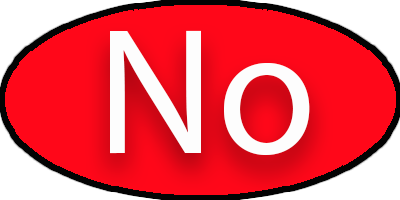
<style>
.page{position:relative;width:400px;height:200px;background:#ff0719}
.page>*{position:absolute;margin:0}
.t1{font:181.1px "MyriadPro-Regular";letter-spacing:0.01em;color:#fdfdfd}
</style>
<div class="page">
<p class="t1" style="left:110px;top:30px;width:200px;height:126px">No</p>
</div>
